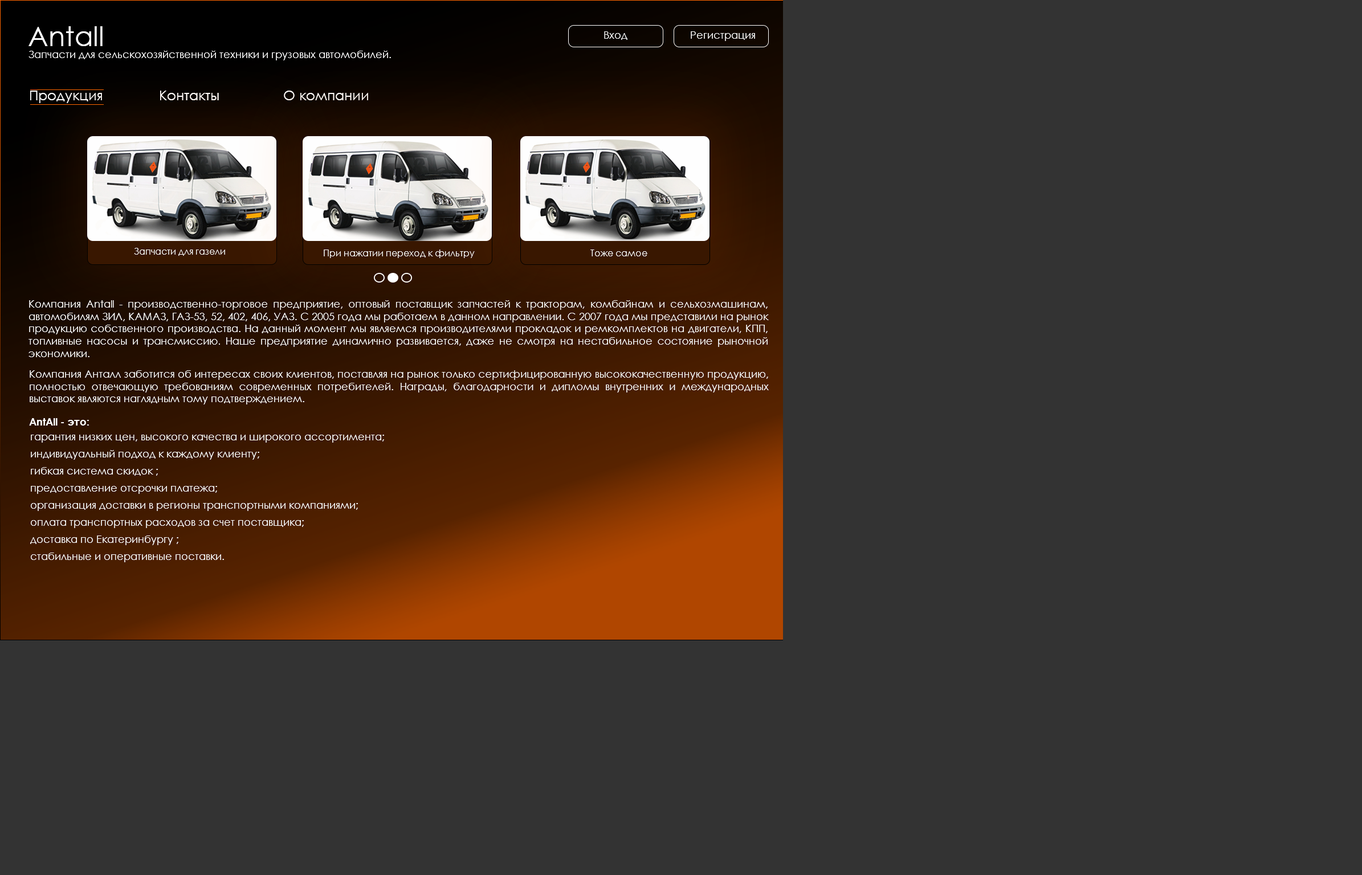
<style>
.page{position:relative;width:1362px;height:875px;background:#333333}
.page>*{position:absolute;margin:0}
.t1{font:27.4px "CenturyGothic";color:#ffffff}
.t2{font:10.3px "CenturyGothic";color:#ffffff}
.t3{font:13.7px "CenturyGothic";color:#ffffff}
.t4{font:9.1px "CenturyGothic";color:#ffffff}
.t5{font:10.3px "CenturyGothic-Bold";color:#ffffff}
.t6{font:10.3px/17.1px "CenturyGothic";color:#ffffff}
</style>
<div class="page">
<p class="t1" style="left:28px;top:26px;width:75px;height:20px">Antall</p>
<p class="t2" style="left:604px;top:31px;width:23px;height:9px">Вход</p>
<p class="t2" style="left:691px;top:31px;width:64px;height:10px">Регистрация</p>
<p class="t2" style="left:28px;top:51px;width:363px;height:9px">Запчасти для сельскохозяйственной техники и грузовых автомобилей.</p>
<p class="t3" style="left:30px;top:91px;width:338px;height:12px">Продукция              Контакты                О компании</p>
<p class="t4" style="left:134px;top:248px;width:91px;height:8px">Запчасти для газели</p>
<p class="t4" style="left:324px;top:250px;width:151px;height:8px">При нажатии переход к фильтру</p>
<p class="t4" style="left:590px;top:250px;width:57px;height:6px">Тоже самое</p>
<p class="t2" style="left:28px;top:300px;width:741px;height:57px;text-align:justify">Компания Antall - производственно-торговое предприятие, оптовый поставщик запчастей к тракторам, комбайнам и сельхозмашинам, автомобилям ЗИЛ, КАМАЗ, ГАЗ-53, 52, 402, 406, УАЗ. С 2005 года мы работаем в данном направлении. С 2007 года мы представили на рынок продукцию собственного производства. На данный момент мы являемся производителями прокладок и ремкомплектов на двигатели, КПП, топливные насосы и трансмиссию. Наше предприятие динамично развивается, даже не смотря на нестабильное состояние рыночной экономики.</p>
<p class="t2" style="left:30px;top:370px;width:739px;height:35px;text-align:justify">Компания Анталл заботится об интересах своих клиентов, поставляя на рынок только сертифицированную высококачественную продукцию, полностью отвечающую требованиям современных потребителей. Награды, благодарности и дипломы внутренних и международных выставок являются наглядным тому подтверждением.</p>
<p class="t5" style="left:29px;top:418px;width:60px;height:8px">AntAll - это:</p>
<p class="t6" style="left:30px;top:435px;width:354px;height:128px">гарантия низких цен, высокого качества и широкого ассортимента; <br>индивидуальный подход к каждому клиенту; <br>гибкая система скидок ;<br>предоставление отсрочки платежа; <br>организация доставки в регионы транспортными компаниями;<br>оплата транспортных расходов за счет поставщика; <br>доставка по Екатеринбургу ;<br>стабильные и оперативные поставки.</p>
</div>
